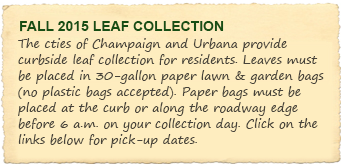
<style>
.page{position:relative;width:341px;height:166px;background:#feedbf}
.page>*{position:absolute;margin:0}
.t1{font:14px "Arial-BoldMT";color:#174e14}
.t2{font:12px/16px "SegoePrint";color:#47433a}
</style>
<div class="page">
<p class="t1" style="left:20px;top:21px;width:204px;height:10px">FALL 2015 LEAF COLLECTION</p>
<p class="t2" style="left:18px;top:38px;width:306px;height:110px">The cties of Champaign and Urbana provide curbside leaf collection for residents. Leaves must be placed in 30-gallon paper lawn &amp; garden bags (no plastic bags accepted). Paper bags must be placed at the curb or along the roadway edge before 6 a.m. on your collection day. Click on the links below for pick-up dates.</p>
</div>
